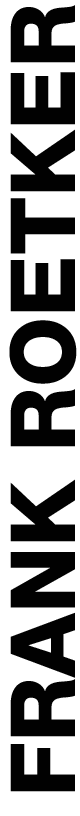
<style>
.page{position:relative;width:80px;height:816px;background:#ffffff}
.page>*{position:absolute;margin:0}
.t1{font:90px "HelveticaNeueHeavy";color:#010101}
</style>
<div class="page">
<p class="t1" style="left:9px;top:5px;width:68px;height:787px;rotate:-90deg">FRANK ROETKER</p>
</div>
